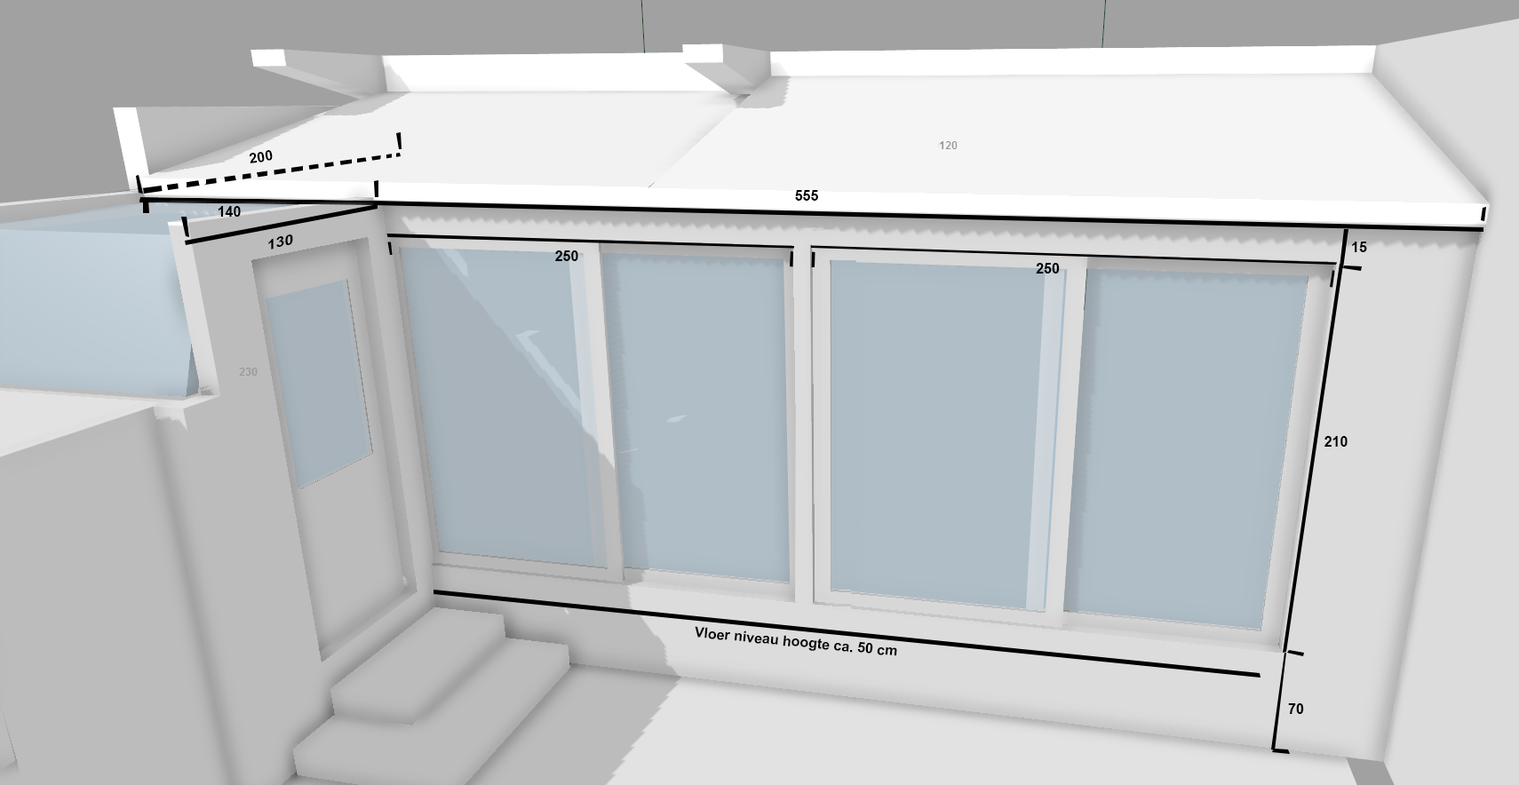
<style>
.page{position:relative;width:1519px;height:785px}
.page>*{position:absolute;margin:0}
.t1{font:14.2px "Arial-BoldMT";color:#000000}
.t2{font:14.2px "Arial-BoldMT";color:#000000;scale:1.15 1}
</style>
<div class="page">
<p class="t1" style="left:249px;top:150px;width:24px;height:13px;rotate:-7deg">200</p>
<p class="t1" style="left:795px;top:190px;width:23px;height:11px">555</p>
<p class="t1" style="left:218px;top:206px;width:23px;height:11px">140</p>
<p class="t2" style="left:268px;top:234px;width:25px;height:16px;rotate:-15deg">130</p>
<p class="t1" style="left:1352px;top:242px;width:15px;height:10px">15</p>
<p class="t1" style="left:555px;top:250px;width:23px;height:11px">250</p>
<p class="t1" style="left:1036px;top:263px;width:24px;height:11px">250</p>
<p class="t1" style="left:1324px;top:436px;width:23px;height:11px">210</p>
<p class="t1" style="left:695px;top:626px;width:202px;height:30px;rotate:5deg">Vloer niveau hoogte ca. 50 cm</p>
<p class="t1" style="left:1288px;top:703px;width:16px;height:11px">70</p>
</div>
